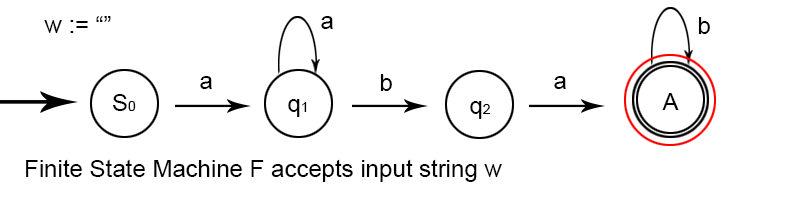
<style>
.page{position:relative;width:800px;height:200px;background:#ffffff}
.page>*{position:absolute;margin:0}
.t1{font:24px "ArialMT";color:#000000}
.t2{font:14px "ArialMT";color:#000000}
</style>
<div class="page">
<p class="t1" style="left:44px;top:16px;width:67px;height:17px">w := “”</p>
<p class="t1" style="left:321px;top:16px;width:12px;height:13px">a</p>
<p class="t1" style="left:698px;top:17px;width:12px;height:17px">b</p>
<p class="t1" style="left:200px;top:76px;width:12px;height:13px">a</p>
<p class="t1" style="left:380px;top:74px;width:12px;height:17px">b</p>
<p class="t1" style="left:554px;top:76px;width:12px;height:13px">a</p>
<p class="t1" style="left:113px;top:94px;width:23px;height:17px">S<span class="t2">0</span></p>
<p class="t1" style="left:288px;top:99px;width:19px;height:18px">q<span class="t2">1</span></p>
<p class="t1" style="left:470px;top:101px;width:20px;height:18px">q<span class="t2">2</span></p>
<p class="t1" style="left:662px;top:93px;width:17px;height:17px">A</p>
<p class="t1" style="left:26px;top:159px;width:476px;height:23px">Finite State Machine F accepts input string w</p>
</div>
